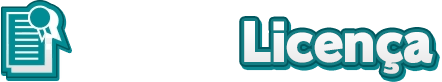
<style>
.page{position:relative;width:442px;height:82px;background:#ffffff}
.page>*{position:absolute;margin:0}
.t1{font:52px "RodinPro-UB";letter-spacing:-0.041em;color:#f2f3f3;scale:0.95 1}
</style>
<div class="page">
<p class="t1" style="left:244px;top:21px;width:189px;height:53px">Licença</p>
</div>
